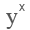
<style>
.page{position:relative;width:30px;height:30px;background:#ffffff}
.page>*{position:absolute;margin:0}
.t1{font:12px "ArialMT";color:#555555}
.t2{font:24px "Times-Roman";color:#555555}
</style>
<div class="page">
<p class="t1" style="left:19px;top:4px;width:6px;height:7px">x</p>
<p class="t2" style="left:6px;top:13px;width:12px;height:16px">y</p>
</div>
